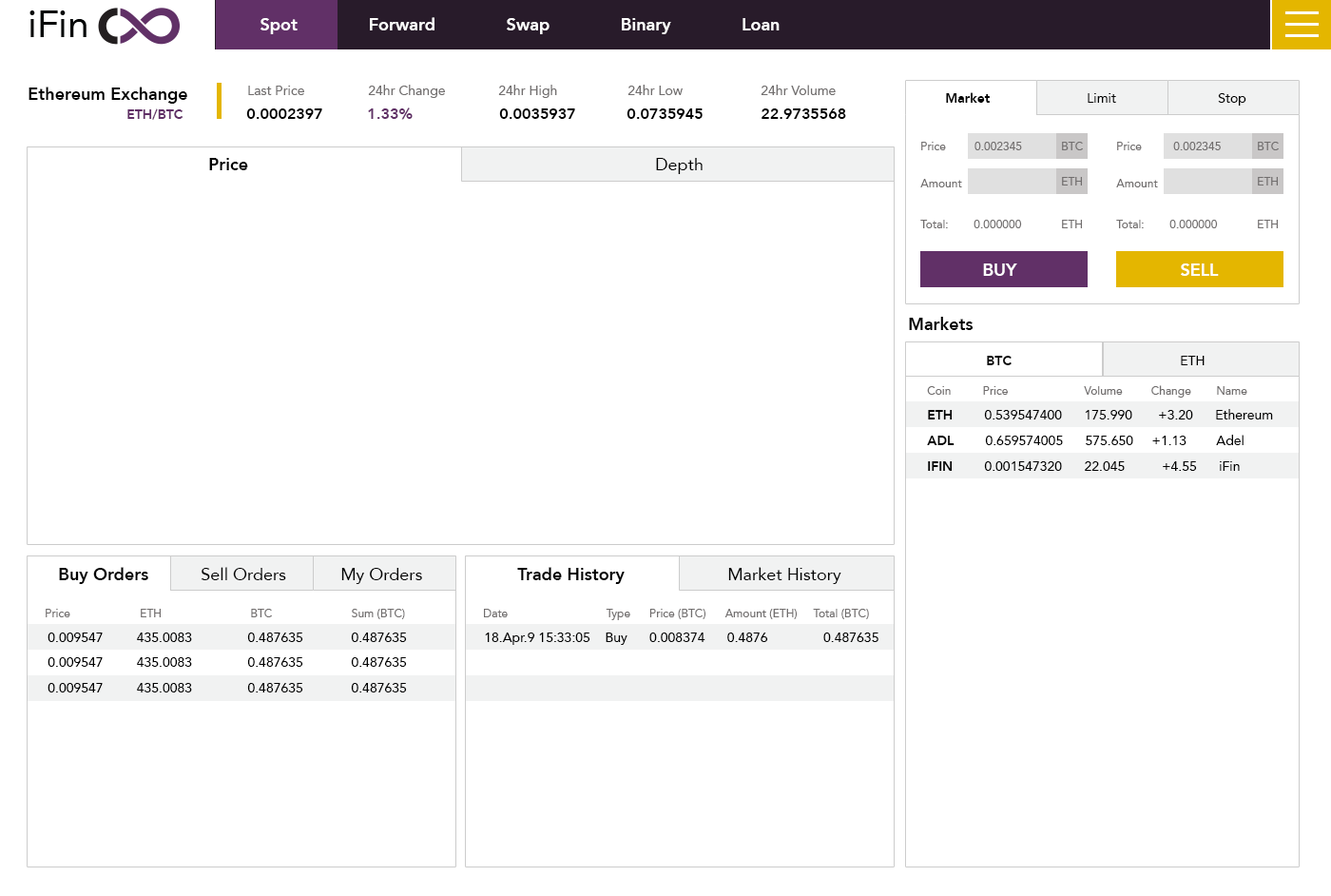
<style>
.page{position:relative;width:1331px;height:896px;background:#ffffff}
.page>*{position:absolute;margin:0}
.t1{font:17.1px "Avenir-Heavy";color:#ffffff}
.t2{font:17.1px "Avenir-Heavy";color:#000000}
.t3{font:13.3px "Avenir-Roman";color:#716e6e}
.t4{font:13.3px "Avenir-Heavy";color:#000000}
.t5{font:13.3px "Avenir-Roman";color:#000000}
.t6{font:13.3px "Avenir-Heavy";color:#613067}
.t7{font:15.2px "Avenir-Heavy";color:#000000}
.t8{font:15.2px "Avenir-Heavy";color:#613067}
.t9{font:11.4px "Avenir-Roman";color:#716e6e}
.t10{font:17.1px "Avenir-Roman";color:#000000}
</style>
<div class="page">
<p class="t1" style="left:261px;top:17px;width:519px;height:17px">Spot              Forward              Swap              Binary              Loan</p>
<p class="t2" style="left:29px;top:87px;width:158px;height:17px">Ethereum Exchange</p>
<p class="t3" style="left:248px;top:86px;width:56px;height:9px">Last Price</p>
<p class="t3" style="left:368px;top:85px;width:77px;height:13px">24hr Change</p>
<p class="t3" style="left:498px;top:85px;width:59px;height:13px">24hr High</p>
<p class="t3" style="left:628px;top:85px;width:55px;height:10px">24hr Low</p>
<p class="t3" style="left:761px;top:85px;width:75px;height:10px">24hr Volume</p>
<p class="t4" style="left:946px;top:92px;width:44px;height:11px">Market</p>
<p class="t5" style="left:1088px;top:93px;width:28px;height:10px">Limit</p>
<p class="t5" style="left:1218px;top:93px;width:29px;height:13px">Stop</p>
<p class="t6" style="left:127px;top:108px;width:57px;height:12px">ETH/BTC</p>
<p class="t7" style="left:246px;top:108px;width:76px;height:11px">0.0002397</p>
<p class="t8" style="left:368px;top:107px;width:45px;height:13px">1.33%</p>
<p class="t7" style="left:499px;top:108px;width:76px;height:11px">0.0035937</p>
<p class="t7" style="left:627px;top:108px;width:76px;height:11px">0.0735945</p>
<p class="t7" style="left:762px;top:108px;width:84px;height:11px">22.9735568</p>
<p class="t9" style="left:921px;top:142px;width:101px;height:8px">Price         0.002345</p>
<p class="t9" style="left:1062px;top:142px;width:21px;height:8px">BTC</p>
<p class="t9" style="left:1117px;top:142px;width:104px;height:8px">Price          0.002345</p>
<p class="t9" style="left:1258px;top:142px;width:21px;height:8px">BTC</p>
<p class="t2" style="left:209px;top:158px;width:39px;height:12px">Price</p>
<p class="t10" style="left:656px;top:158px;width:47px;height:16px">Depth</p>
<p class="t9" style="left:920px;top:179px;width:42px;height:8px">Amount</p>
<p class="t9" style="left:1062px;top:177px;width:20px;height:8px">ETH</p>
<p class="t9" style="left:1116px;top:179px;width:42px;height:8px">Amount</p>
<p class="t9" style="left:1258px;top:177px;width:20px;height:8px">ETH</p>
<p class="t9" style="left:920px;top:220px;width:102px;height:8px">Total:        0.000000</p>
<p class="t9" style="left:1062px;top:220px;width:20px;height:8px">ETH</p>
<p class="t9" style="left:1116px;top:220px;width:102px;height:8px">Total:        0.000000</p>
<p class="t9" style="left:1258px;top:220px;width:20px;height:8px">ETH</p>
<p class="t1" style="left:983px;top:263px;width:34px;height:13px">BUY</p>
<p class="t1" style="left:1181px;top:263px;width:38px;height:13px">SELL</p>
<p class="t2" style="left:909px;top:317px;width:65px;height:13px">Markets</p>
<p class="t4" style="left:987px;top:356px;width:25px;height:9px">BTC</p>
<p class="t5" style="left:1181px;top:356px;width:24px;height:9px">ETH</p>
<p class="t9" style="left:927px;top:385px;width:321px;height:12px">Coin          Price                        Volume         Change        Name</p>
<p class="t5" style="left:928px;top:409px;width:345px;height:10px"><span class="t4">ETH        </span>0.539547400      175.990       +3.20      Ethereum</p>
<p class="t5" style="left:927px;top:435px;width:317px;height:10px"><span class="t4">ADL        </span>0.659574005      575.650     +1.13        Adel</p>
<p class="t5" style="left:928px;top:461px;width:312px;height:10px"><span class="t4">IFIN        </span>0.001547320      22.045          +4.55      iFin</p>
<p class="t2" style="left:59px;top:567px;width:89px;height:17px">Buy Orders</p>
<p class="t10" style="left:201px;top:567px;width:85px;height:13px">Sell Orders</p>
<p class="t10" style="left:341px;top:568px;width:81px;height:16px">My Orders</p>
<p class="t2" style="left:517px;top:567px;width:108px;height:17px">Trade History</p>
<p class="t10" style="left:728px;top:567px;width:114px;height:17px">Market History</p>
<p class="t9" style="left:46px;top:609px;width:359px;height:10px">Price                      ETH                            BTC                         Sum (BTC)</p>
<p class="t9" style="left:484px;top:609px;width:385px;height:11px">Date                               Type      Price (BTC)      Amount (ETH)     Total (BTC)</p>
<p class="t5" style="left:48px;top:632px;width:359px;height:10px">0.009547         435.0083               0.487635             0.487635</p>
<p class="t5" style="left:485px;top:632px;width:394px;height:13px">18.Apr.9 15:33:05    Buy      0.008374      0.4876               0.487635</p>
<p class="t5" style="left:48px;top:657px;width:359px;height:10px">0.009547         435.0083               0.487635             0.487635</p>
<p class="t5" style="left:48px;top:683px;width:359px;height:9px">0.009547         435.0083               0.487635             0.487635</p>
</div>
